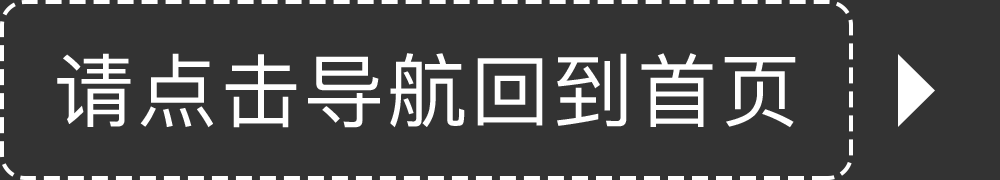
<style>
.page{position:relative;width:1000px;height:180px;background:#333333}
.page>*{position:absolute;margin:0}
.t1{font:80px "PingFang-SC-Medium";letter-spacing:0.04em;color:#ffffff;text-transform:uppercase}
</style>
<div class="page">
<p class="t1" style="left:57px;top:53px;width:739px;height:75px">请点击导航回到首页</p>
</div>
